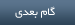
<style>
.page{position:relative;width:75px;height:25px}
.page>*{position:absolute;margin:0}
.t1{font:12px "BYekan";color:#ffffff}
</style>
<div class="page">
<p class="t1" style="left:15px;top:6px;width:40px;height:12px">گام بعدی</p>
</div>
